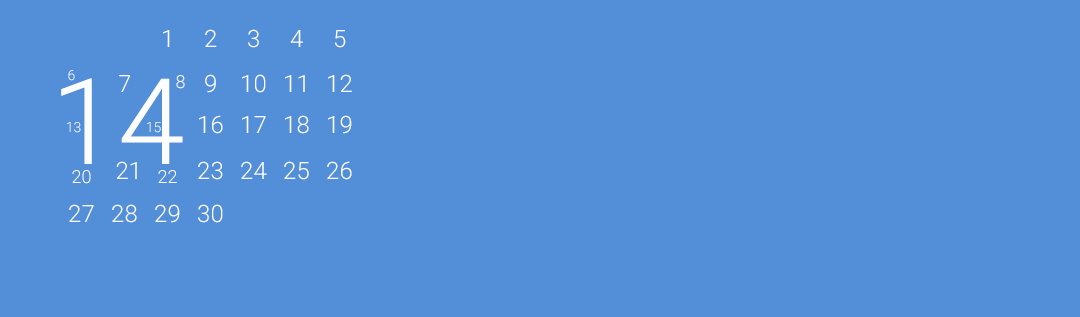
<style>
.page{position:relative;width:1080px;height:317px;background:#538ed9}
.page>*{position:absolute;margin:0}
.t1{font:24px "Roboto-Light";color:#fcfdfe}
.t2{font:120px "Roboto-Light";color:#fcfdfe}
.t3{font:14px "Roboto-Light"}
.t4{font:18px "Roboto-Light";color:#fcfdfe}
.t5{font:14px "Roboto-Light";color:#fcfdfe}
</style>
<div class="page">
<p class="t1" style="left:163px;top:30px;width:7px;height:17px">1</p>
<p class="t1" style="left:205px;top:29px;width:12px;height:18px">2</p>
<p class="t1" style="left:248px;top:29px;width:11px;height:19px">3</p>
<p class="t1" style="left:290px;top:30px;width:13px;height:17px">4</p>
<p class="t1" style="left:335px;top:30px;width:11px;height:18px">5</p>
<p class="t2" style="left:61px;top:78px;width:122px;height:86px">14</p>
<p class="t3" style="left:68px;top:70px;width:7px;height:11px">6</p>
<p class="t1" style="left:119px;top:75px;width:11px;height:17px">7</p>
<p class="t4" style="left:176px;top:75px;width:9px;height:14px">8</p>
<p class="t1" style="left:205px;top:74px;width:11px;height:19px">9</p>
<p class="t1" style="left:242px;top:74px;width:24px;height:19px">10</p>
<p class="t1" style="left:285px;top:75px;width:20px;height:17px">11</p>
<p class="t1" style="left:328px;top:74px;width:24px;height:18px">12</p>
<p class="t3" style="left:67px;top:122px;width:14px;height:11px">13</p>
<p class="t5" style="left:147px;top:122px;width:14px;height:11px">15</p>
<p class="t1" style="left:199px;top:115px;width:24px;height:19px">16</p>
<p class="t1" style="left:242px;top:116px;width:24px;height:17px">17</p>
<p class="t1" style="left:285px;top:115px;width:24px;height:19px">18</p>
<p class="t1" style="left:328px;top:115px;width:24px;height:19px">19</p>
<p class="t1" style="left:116px;top:161px;width:21px;height:18px">21</p>
<p class="t1" style="left:198px;top:161px;width:25px;height:19px">23</p>
<p class="t1" style="left:241px;top:161px;width:26px;height:18px">24</p>
<p class="t1" style="left:284px;top:161px;width:25px;height:19px">25</p>
<p class="t1" style="left:327px;top:161px;width:25px;height:19px">26</p>
<p class="t4" style="left:72px;top:170px;width:19px;height:14px">20</p>
<p class="t4" style="left:158px;top:170px;width:19px;height:13px">22</p>
<p class="t1" style="left:69px;top:204px;width:25px;height:18px">27</p>
<p class="t1" style="left:112px;top:204px;width:25px;height:19px">28</p>
<p class="t1" style="left:155px;top:204px;width:25px;height:19px">29</p>
<p class="t1" style="left:198px;top:204px;width:25px;height:19px">30</p>
</div>
